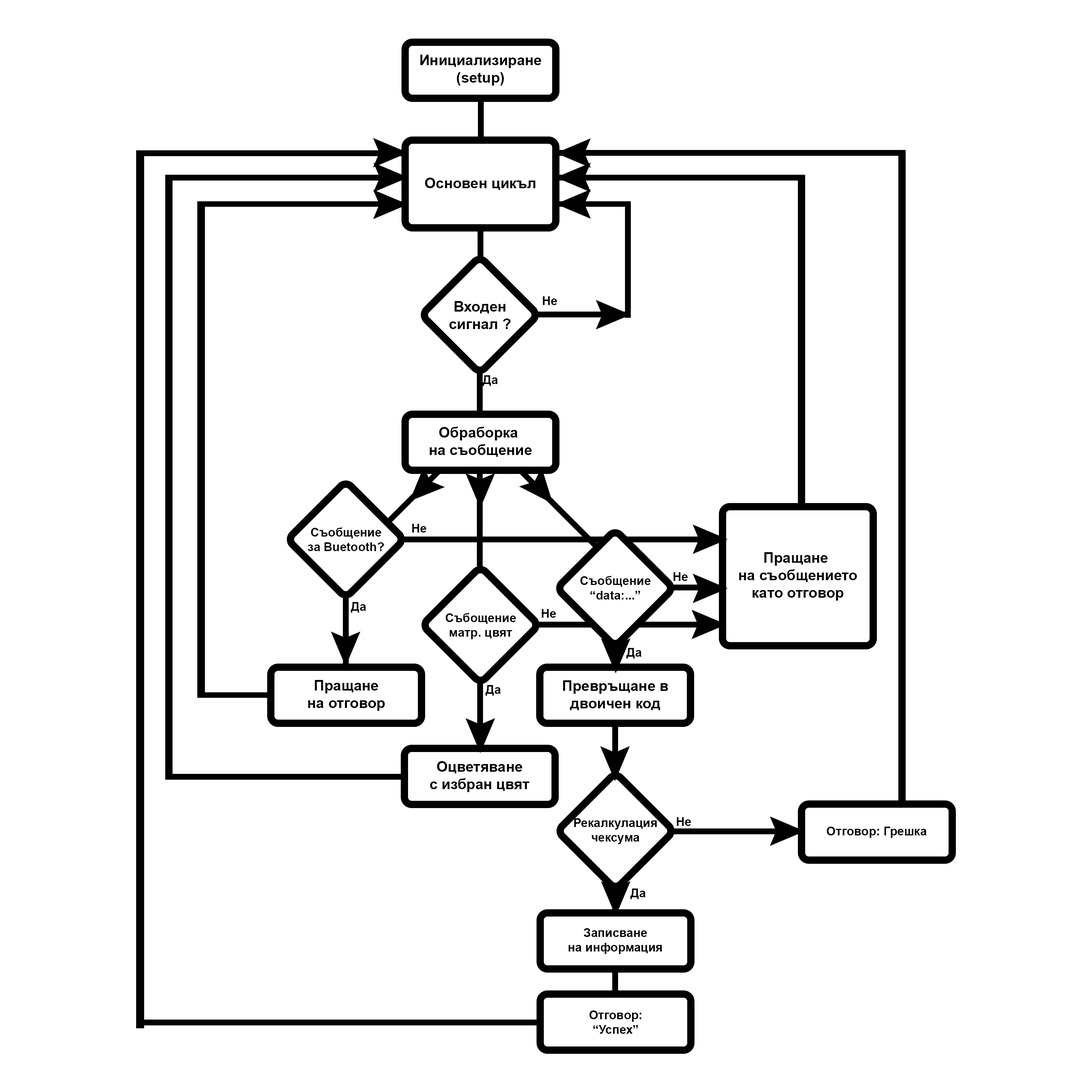
<style>
.page{position:relative;width:1092px;height:1092px;background:#ffffff}
.page>*{position:absolute;margin:0}
.t1{font:14.6px "Arial-BoldMT";color:#000000}
.t2{font:12.1px "Arial-BoldMT";color:#000000}
</style>
<div class="page">
<p class="t1" style="left:420px;top:55px;width:121px;height:31px;text-align:center">Инициализиране<br>(setup)</p>
<p class="t1" style="left:425px;top:178px;width:110px;height:12px">Основен цикъл</p>
<p class="t1" style="left:449px;top:301px;width:62px;height:28px;text-align:center">Входен<br>сигнал ?</p>
<p class="t2" style="left:543px;top:296px;width:14px;height:9px">Не</p>
<p class="t2" style="left:482px;top:375px;width:16px;height:11px">Да</p>
<p class="t1" style="left:430px;top:427px;width:102px;height:30px;text-align:center">Обраборка <br>на съобщение</p>
<p class="t2" style="left:308px;top:527px;width:76px;height:24px;text-align:center">Съобщение<br>за Buetooth?</p>
<p class="t2" style="left:412px;top:524px;width:15px;height:9px">Не</p>
<p class="t1" style="left:739px;top:552px;width:118px;height:49px;text-align:center">Пращане <br>на съобщението<br>като отговор</p>
<p class="t2" style="left:580px;top:576px;width:71px;height:24px;text-align:center">Съобщение<br>“data:...”</p>
<p class="t2" style="left:673px;top:572px;width:15px;height:9px">Не</p>
<p class="t2" style="left:351px;top:602px;width:15px;height:11px">Да</p>
<p class="t2" style="left:446px;top:613px;width:70px;height:26px;text-align:center">Събощение<br>матр. цвят</p>
<p class="t2" style="left:542px;top:609px;width:14px;height:9px">Не</p>
<p class="t2" style="left:626px;top:648px;width:16px;height:10px">Да</p>
<p class="t1" style="left:308px;top:680px;width:77px;height:31px;text-align:center">Пращане<br>на отговор</p>
<p class="t2" style="left:485px;top:685px;width:16px;height:11px">Да</p>
<p class="t1" style="left:563px;top:680px;width:105px;height:30px;text-align:center">Превръщане в<br>двоичен код</p>
<p class="t1" style="left:430px;top:761px;width:100px;height:31px;text-align:center">Оцветяване<br>с избран цвят</p>
<p class="t2" style="left:574px;top:818px;width:83px;height:26px;text-align:center">Рекалкулация<br>чексума</p>
<p class="t2" style="left:677px;top:817px;width:14px;height:9px">Не</p>
<p class="t2" style="left:827px;top:827px;width:100px;height:11px">Отговор: Грешка</p>
<p class="t2" style="left:630px;top:889px;width:16px;height:10px">Да</p>
<p class="t2" style="left:569px;top:928px;width:93px;height:26px;text-align:center">Записване<br>на информация</p>
<p class="t2" style="left:589px;top:1010px;width:52px;height:24px;text-align:center">Отговор:<br>“Успех”</p>
</div>
